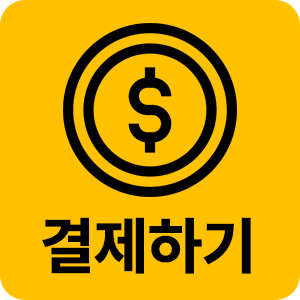
<style>
.page{position:relative;width:300px;height:300px;background:#ffc100}
.page>*{position:absolute;margin:0}
.t1{font:62.5px "Pretendard-ExtraBold";color:#000000}
</style>
<div class="page">
<p class="t1" style="left:42px;top:217px;width:209px;height:57px">결제하기</p>
</div>
